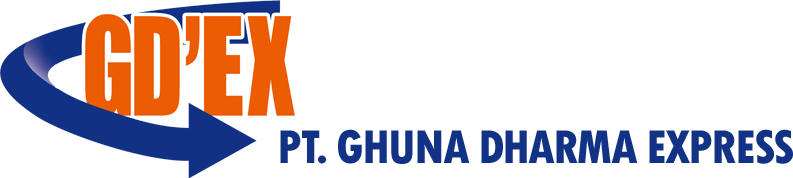
<style>
.page{position:relative;width:793px;height:178px;background:#ffffff}
.page>*{position:absolute;margin:0}
.t1{font:49.8px "TwCenMT-CondensedExtraBold";letter-spacing:-0.04em;color:#113285}
</style>
<div class="page">
<p class="t1" style="left:280px;top:129px;width:513px;height:35px">PT. GHUNA DHARMA EXPRESS</p>
</div>
